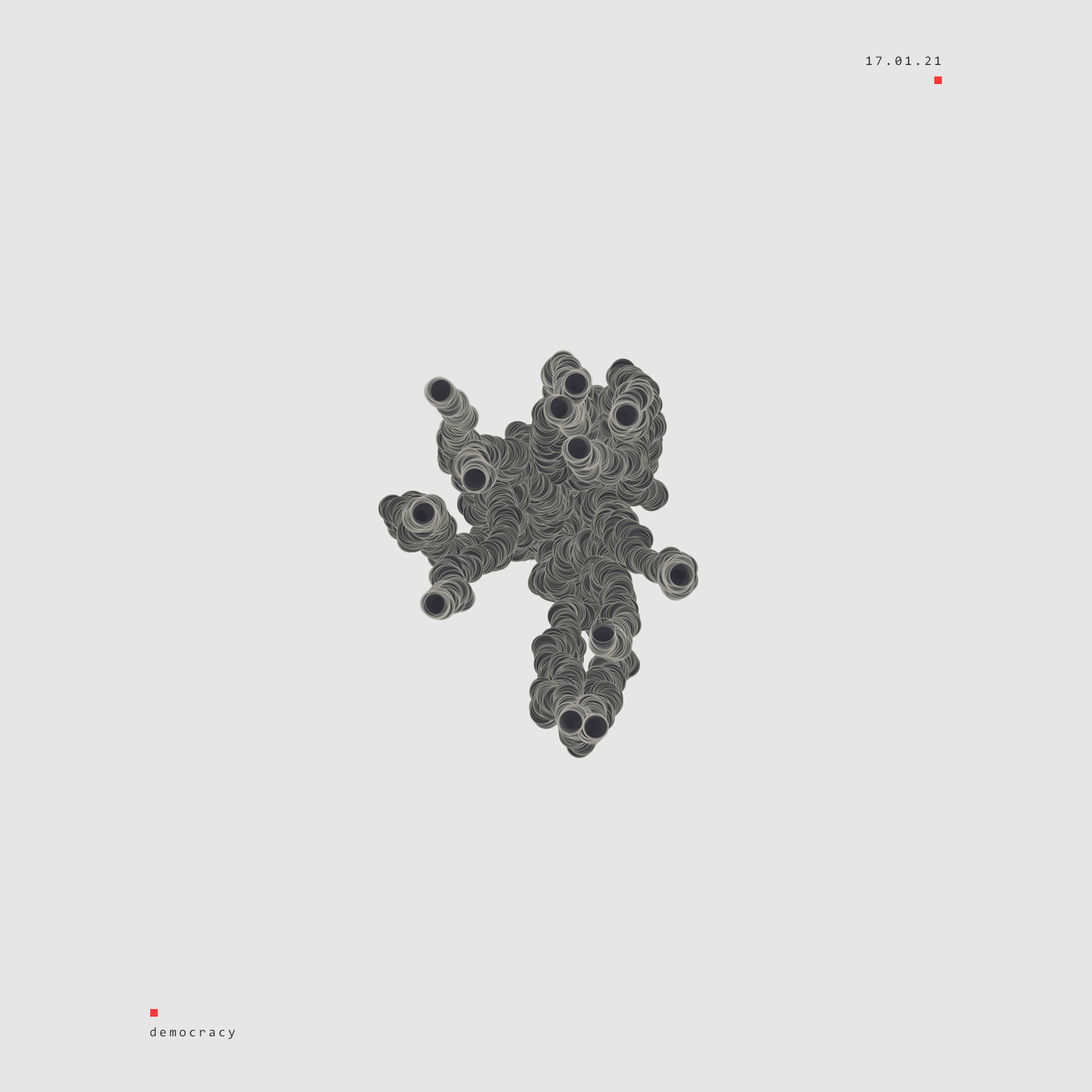
<style>
.page{position:relative;width:1092px;height:1092px;background:#e6e6e6}
.page>*{position:absolute;margin:0}
.t1{font:13.1px "Consolas";letter-spacing:0.2em;color:#353535}
</style>
<div class="page">
<p class="t1" style="left:866px;top:56px;width:75px;height:10px">17.01.21</p>
<p class="t1" style="left:150px;top:1027px;width:85px;height:12px">democracy</p>
</div>
